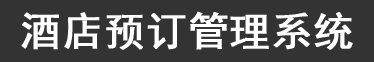
<style>
.page{position:relative;width:374px;height:62px;background:#333333}
.page>*{position:absolute;margin:0}
.t1{font:40px "SimHei";letter-spacing:0.02em;color:#ffffff;font-weight:bold}
</style>
<div class="page">
<p class="t1" style="left:21px;top:11px;width:332px;height:39px">酒店预订管理系统</p>
</div>
